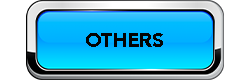
<style>
.page{position:relative;width:250px;height:80px;background:#ffffff}
.page>*{position:absolute;margin:0}
.t1{font:20px "AvenirNext-Bold";color:#040404}
</style>
<div class="page">
<p class="t1" style="left:86px;top:33px;width:77px;height:14px">OTHERS</p>
</div>
